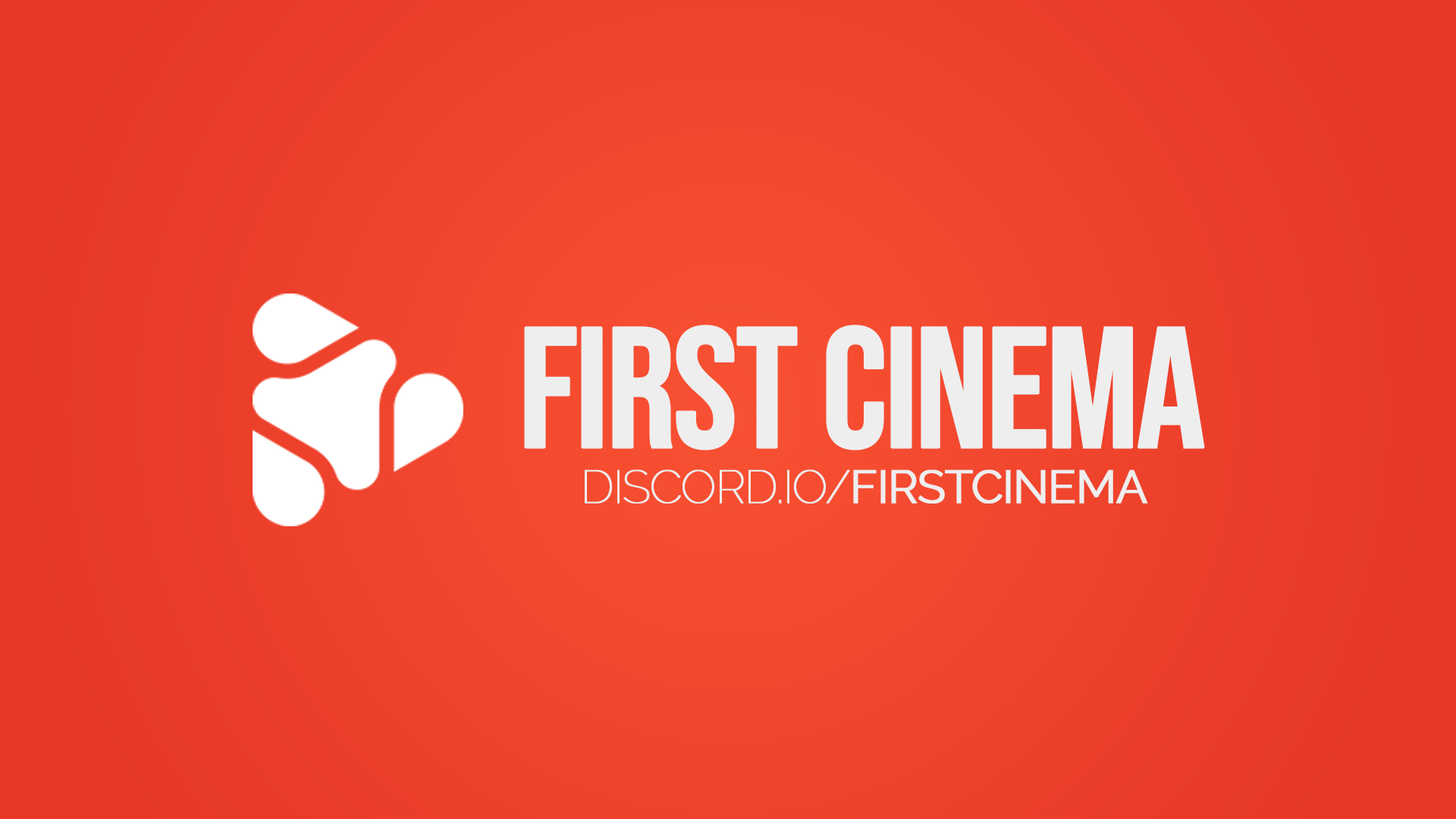
<style>
.page{position:relative;width:1456px;height:819px}
.page>*{position:absolute;margin:0}
.t1{font:171.6px "BebasNeue-Regular";letter-spacing:-0.04em;color:#eeeeee;text-transform:uppercase;font-weight:bold}
.t2{font:46.3px "Raleway-Thin";letter-spacing:-0.04em;color:#eeeeee;text-transform:uppercase;font-weight:bold}
.t3{font:46.3px "Raleway-Regular";letter-spacing:-0.04em;color:#eeeeee;text-transform:uppercase;font-weight:bold}
</style>
<div class="page">
<p class="t1" style="left:524px;top:325px;width:681px;height:125px">First Cinema</p>
<p class="t2" style="left:585px;top:469px;width:563px;height:35px">discord.io/<span class="t3">firstcinema</span></p>
</div>
